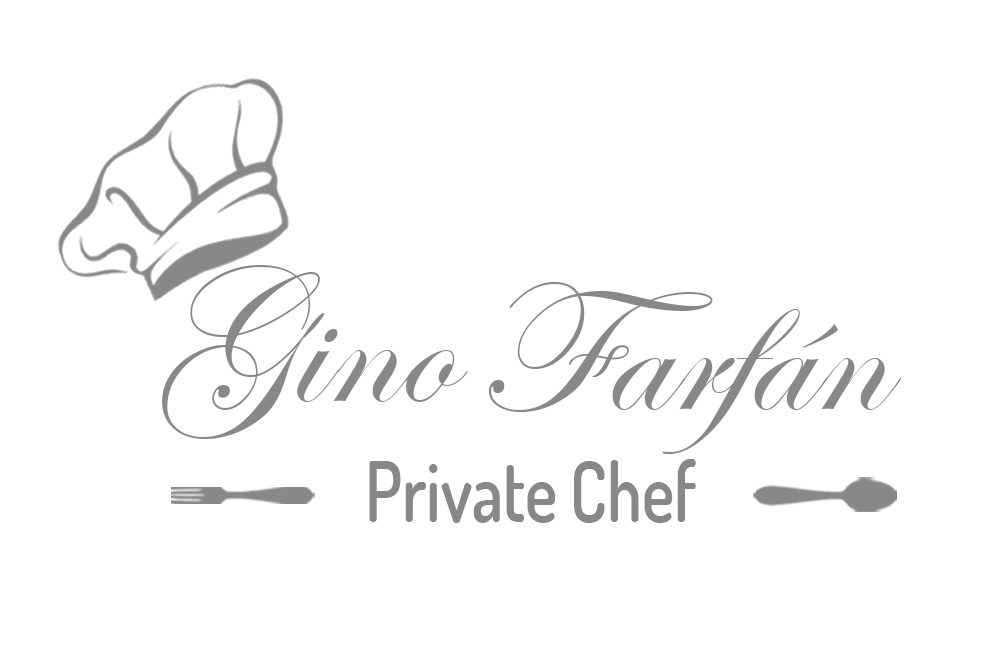
<style>
.page{position:relative;width:1004px;height:650px;background:#ffffff}
.page>*{position:absolute;margin:0}
.t1{font:188.6px "EdwardianScriptITC";color:#888888}
.t2{font:83.2px "Dosis-SemiBold";color:#888888;scale:0.82 1}
</style>
<div class="page">
<p class="t1" style="left:162px;top:265px;width:306px;height:174px">Gino</p>
<p class="t1" style="left:488px;top:282px;width:414px;height:172px">Farfán</p>
<p class="t2" style="left:369px;top:459px;width:327px;height:64px">Private Chef</p>
</div>
